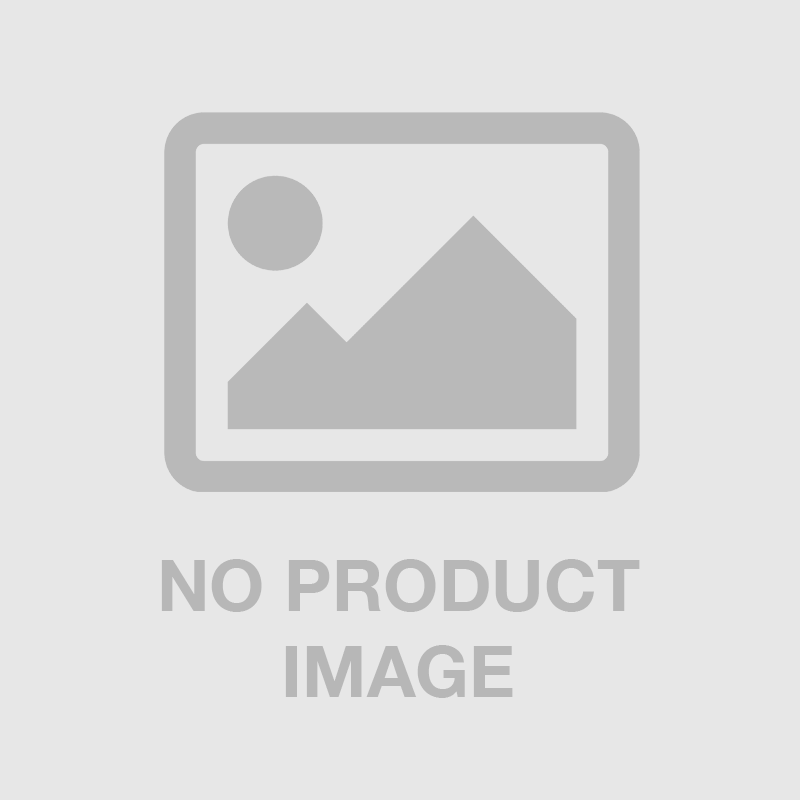
<style>
.page{position:relative;width:800px;height:800px;background:#e7e7e7}
.page>*{position:absolute;margin:0}
.t1{font:71.1px "HelveticaNeue-Bold";color:#b7b7b7}
</style>
<div class="page">
<p class="t1" style="left:161px;top:559px;width:479px;height:139px;text-align:center">NO PRODUCT<br>IMAGE</p>
</div>
